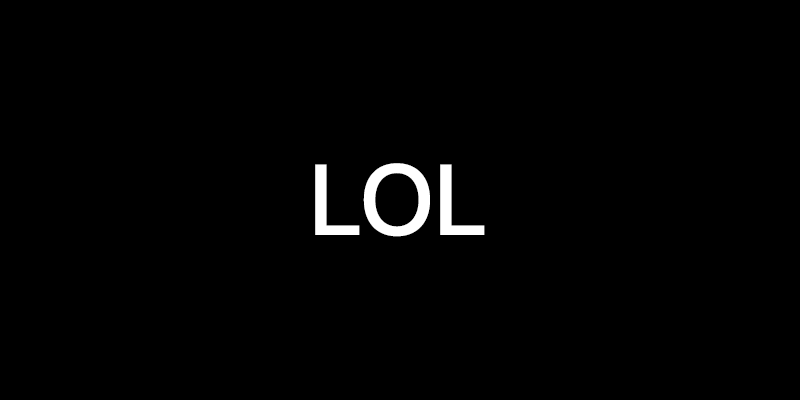
<style>
.page{position:relative;width:800px;height:400px;background:#000000}
.page>*{position:absolute;margin:0}
.t1{font:100px "SFProDisplay-Medium";color:#ffffff}
</style>
<div class="page">
<p class="t1" style="left:315px;top:163px;width:170px;height:74px">LOL</p>
</div>
